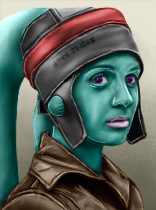
<style>
.page{position:relative;width:156px;height:210px}
.page>*{position:absolute;margin:0}
.t1{font:7.6px "Aurek-BeshHand";color:#000000}
</style>
<div class="page">
<p class="t1" style="left:54px;top:37px;width:42px;height:30px;rotate:-33deg">FREE RYLOTH</p>
</div>
